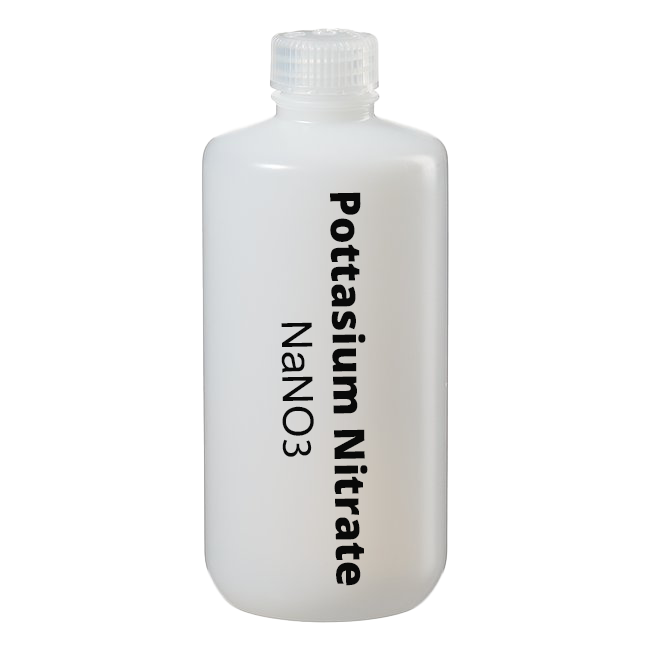
<style>
.page{position:relative;width:650px;height:650px;background:#ffffff}
.page>*{position:absolute;margin:0}
.t1{font:42.3px "OpenSans-Extrabold";color:#0b0b0b}
.t2{font:42.3px "ArialMT";color:#0b0b0b}
.t3{font:42.3px "MyriadPro-Regular";color:#0b0b0b}
</style>
<div class="page">
<p class="t1" style="left:281px;top:192px;width:87px;height:394px;text-align:center;rotate:89deg">Pottasium Nitrate<br><span class="t2">NaNO</span><span class="t3">3</span></p>
</div>
